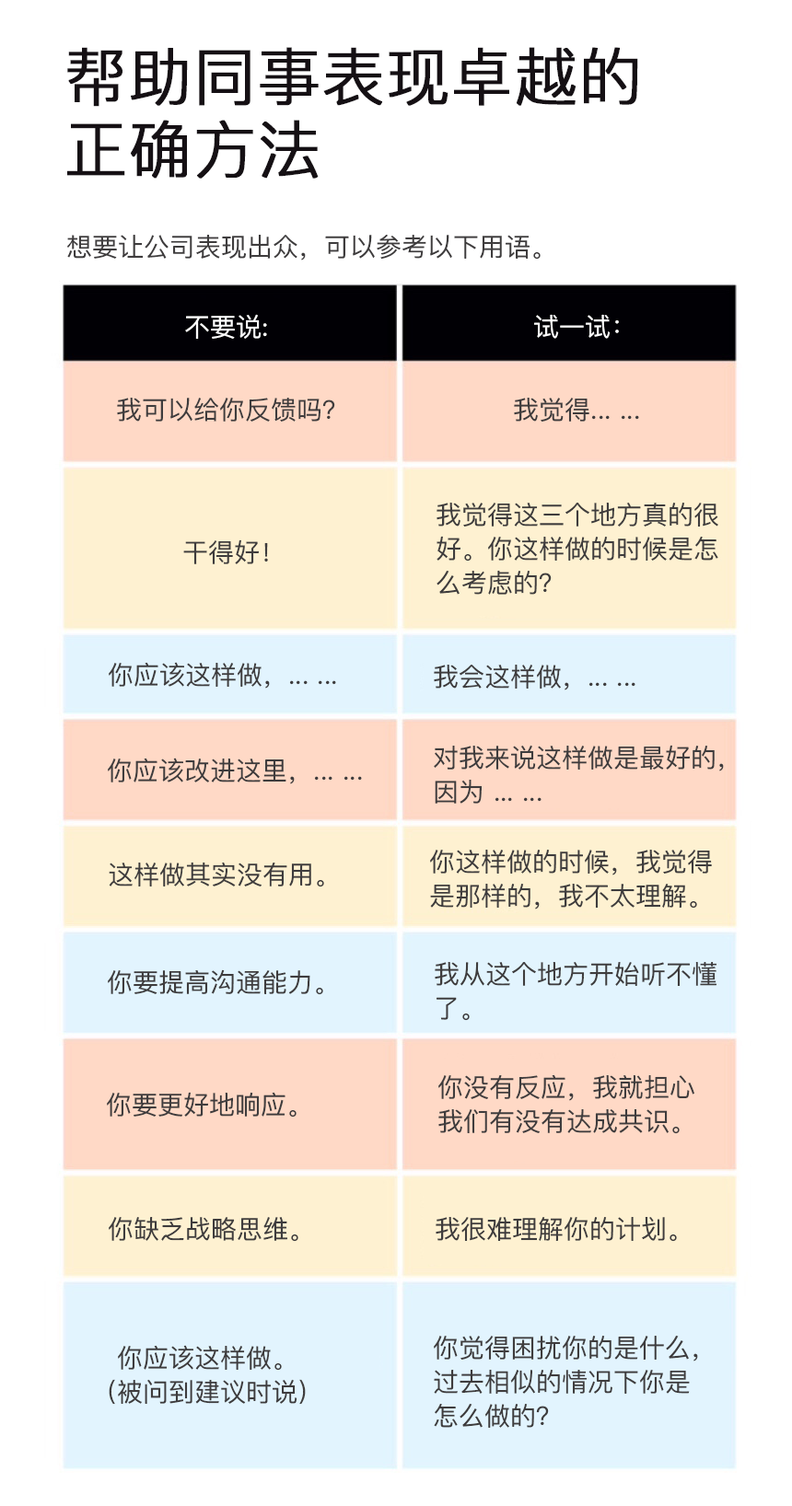
<style>
.page{position:relative;width:792px;height:1506px;background:#ffffff}
.page>*{position:absolute;margin:0}
.t1{font:62.6px/72.7px "PingFangSC-Light";color:#151014;font-weight:bold}
.t2{font:25.8px "PingFangSC-Regular";color:#3e3c3d}
.t3{font:25.8px "PingFangSC-Regular";color:#ffffff}
.t4{font:25.8px/34.1px "PingFangSC-Regular";color:#3e3c3d}
</style>
<div class="page">
<p class="t1" style="left:67px;top:47px;width:571px;height:132px">帮助同事表现卓越的<br>正确方法</p>
<p class="t2" style="left:67px;top:235px;width:473px;height:26px">想要让公司表现出众，可以参考以下用语。</p>
<p class="t3" style="left:185px;top:314px;width:82px;height:25px">不要说:</p>
<p class="t3" style="left:534px;top:314px;width:85px;height:25px">试一试：</p>
<p class="t2" style="left:117px;top:398px;width:218px;height:24px">我可以给你反馈吗？</p>
<p class="t2" style="left:514px;top:398px;width:125px;height:24px">我觉得... ...</p>
<p class="t4" style="left:436px;top:503px;width:282px;height:92px">我觉得这三个地方真的很<br>好。你这样做的时候是怎<br>么考虑的？</p>
<p class="t2" style="left:183px;top:539px;width:85px;height:25px">干得好！</p>
<p class="t2" style="left:109px;top:662px;width:227px;height:27px">你应该这样做，... ...</p>
<p class="t2" style="left:434px;top:665px;width:201px;height:25px">我会这样做，... ...</p>
<p class="t4" style="left:434px;top:745px;width:290px;height:59px">对我来说这样做是最好的，<br>因为 ... ...</p>
<p class="t2" style="left:108px;top:758px;width:254px;height:26px">你应该改进这里，... ...</p>
<p class="t4" style="left:430px;top:850px;width:282px;height:60px">你这样做的时候，我觉得<br>是那样的，我不太理解。</p>
<p class="t2" style="left:109px;top:862px;width:215px;height:25px">这样做其实没有用。</p>
<p class="t4" style="left:435px;top:962px;width:281px;height:59px">我从这个地方开始听不懂<br>了。</p>
<p class="t2" style="left:108px;top:969px;width:215px;height:26px">你要提高沟通能力。</p>
<p class="t4" style="left:438px;top:1074px;width:256px;height:60px">你没有反应，我就担心<br>我们有没有达成共识。</p>
<p class="t2" style="left:107px;top:1092px;width:189px;height:26px">你要更好地响应。</p>
<p class="t2" style="left:109px;top:1217px;width:189px;height:25px">你缺乏战略思维。</p>
<p class="t2" style="left:435px;top:1217px;width:242px;height:25px">我很难理解你的计划。</p>
<p class="t4" style="left:434px;top:1336px;width:264px;height:92px">你觉得困扰你的是什么，<br>过去相似的情况下你是<br>怎么做的？</p>
<p class="t4" style="left:109px;top:1345px;width:197px;height:60px">你应该这样做。<br>（被问到建议时说）</p>
</div>
